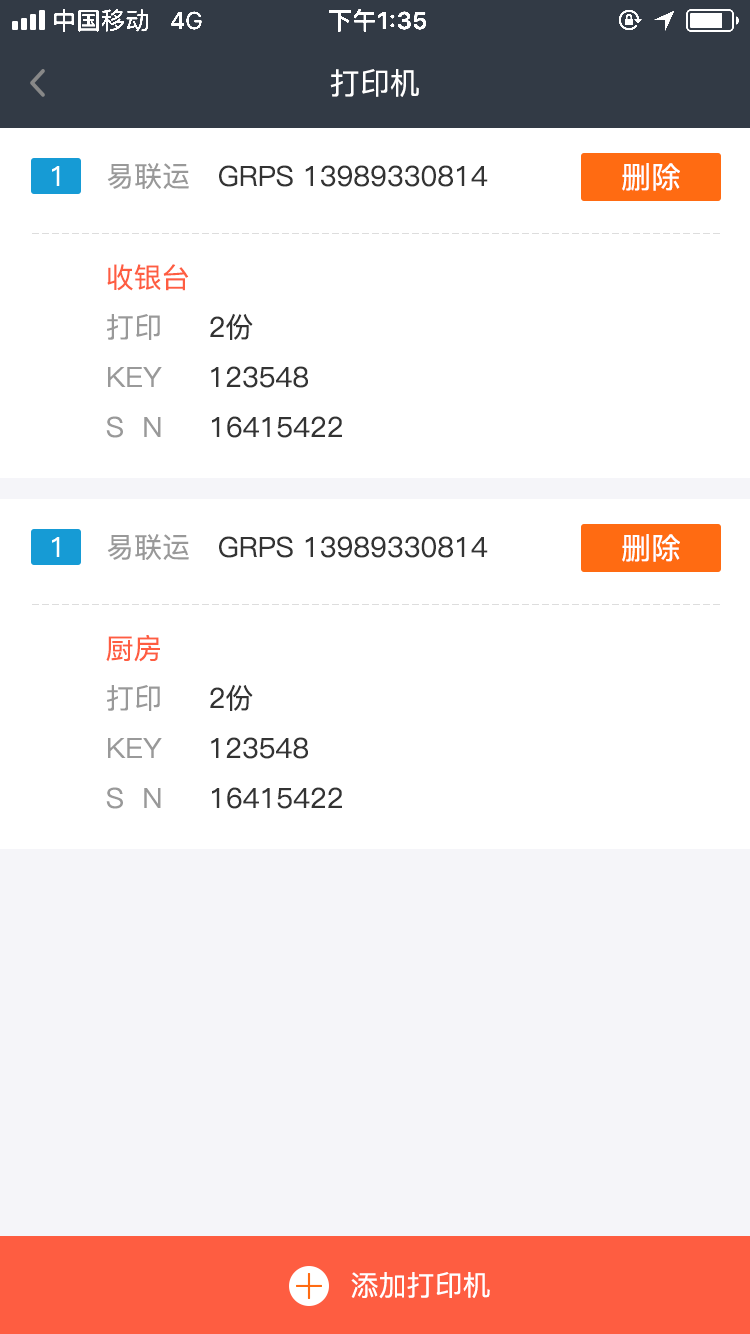
<style>
.page{position:relative;width:750px;height:1334px;background:#ffffff}
.page>*{position:absolute;margin:0}
.t1{font:30px "PingFang-SC-Medium";color:#ffffff}
.t2{font:28px "PingFangSC-Regular";color:#ffffff}
.t3{font:28px "PingFang-SC-Medium";color:#333333}
.t4{font:28px "PingFang-SC-Medium";color:#999999}
.t5{font:28px "PingFang-SC-Medium";color:#fe5d41}
.t6{font:28px/50px "PingFang-SC-Medium";color:#333333}
.t7{font:28px/50px "PingFang-SC-Medium";color:#999999}
.t8{font:28px "PingFang-SC-Medium";color:#ffffff}
</style>
<div class="page">
<p class="t1" style="left:330px;top:69px;width:89px;height:28px">打印机</p>
<p class="t2" style="left:52px;top:166px;width:8px;height:20px">1</p>
<p class="t3" style="left:107px;top:163px;width:381px;height:26px"><span class="t4">易联运   </span>GRPS 13989330814</p>
<p class="t1" style="left:622px;top:163px;width:58px;height:28px">删除</p>
<p class="t5" style="left:107px;top:264px;width:82px;height:27px">收银台</p>
<p class="t6" style="left:106px;top:313px;width:236px;height:125px"><span class="t4">     <br></span><span class="t7">打印     </span>2份<br><span class="t7">KEY     </span>123548<br><span class="t4">S  N     </span>16415422</p>
<p class="t3" style="left:107px;top:534px;width:381px;height:26px"><span class="t4">易联运   </span>GRPS 13989330814</p>
<p class="t1" style="left:622px;top:534px;width:58px;height:28px">删除</p>
<p class="t2" style="left:52px;top:537px;width:8px;height:20px">1</p>
<p class="t5" style="left:106px;top:635px;width:54px;height:27px">厨房</p>
<p class="t6" style="left:106px;top:684px;width:236px;height:125px"><span class="t4">     <br></span><span class="t7">打印     </span>2份<br><span class="t7">KEY     </span>123548<br><span class="t4">S  N     </span>16415422</p>
<p class="t8" style="left:351px;top:1272px;width:139px;height:27px">添加打印机</p>
</div>
